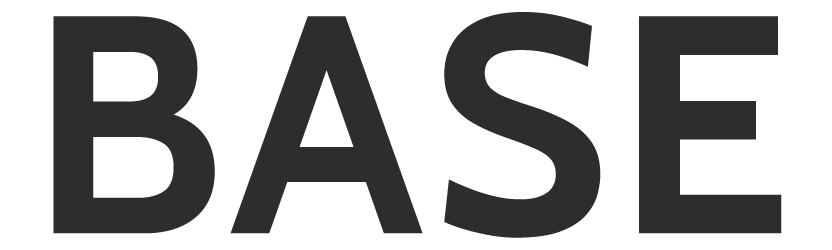
<style>
.page{position:relative;width:832px;height:250px;background:#ffffff}
.page>*{position:absolute;margin:0}
.t1{font:309.7px "Cabin-Bold";letter-spacing:0.02em;color:#2d2d2d}
</style>
<div class="page">
<p class="t1" style="left:53px;top:12px;width:729px;height:226px">BASE</p>
</div>
